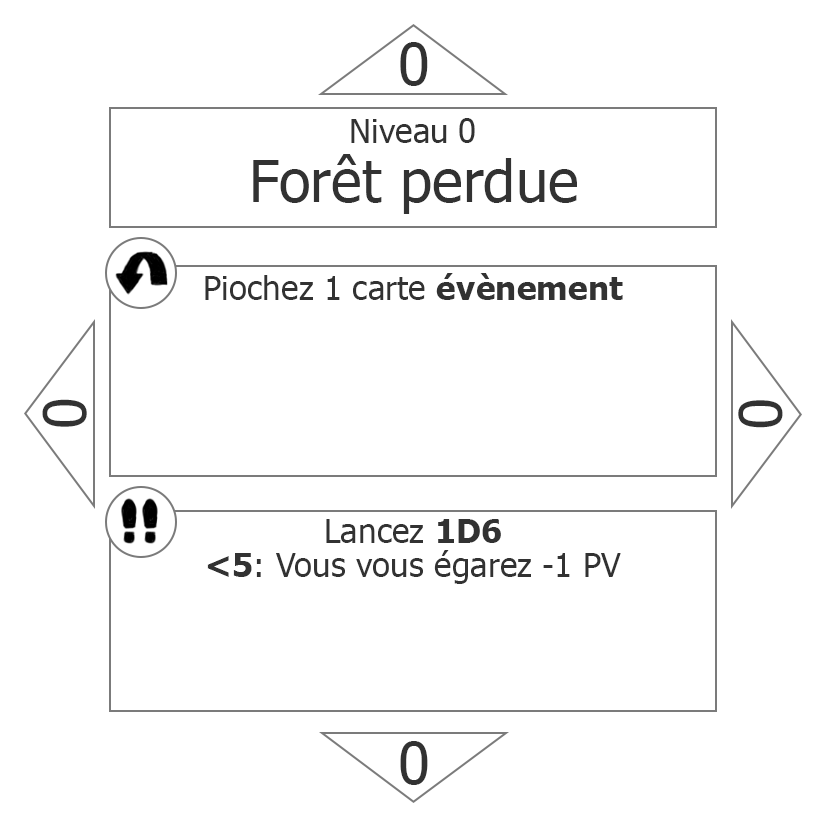
<style>
.page{position:relative;width:827px;height:827px;background:#ffffff}
.page>*{position:absolute;margin:0}
.t1{font:58.3px "Tahoma";color:#323232}
.t2{font:33.3px "Tahoma";color:#323232}
.t3{font:33.3px "Tahoma-Bold";color:#323232}
.t4{font:33.3px/33.3px "Tahoma";color:#323232}
.t5{font:33.3px/33.3px "Tahoma-Bold";color:#323232}
</style>
<div class="page">
<p class="t1" style="left:400px;top:42px;width:28px;height:44px">0</p>
<p class="t2" style="left:351px;top:119px;width:96px;height:24px">Niveau</p>
<p class="t2" style="left:459px;top:118px;width:16px;height:25px">0</p>
<p class="t1" style="left:253px;top:154px;width:324px;height:60px">Forêt perdue</p>
<p class="t2" style="left:205px;top:273px;width:418px;height:27px">Piochez 1 carte <span class="t3">évènement</span></p>
<p class="t1" style="left:42px;top:399px;width:45px;height:28px;rotate:-90deg">0</p>
<p class="t1" style="left:738px;top:400px;width:45px;height:28px;rotate:90deg">0</p>
<p class="t4" style="left:207px;top:519px;width:414px;height:65px;text-align:center">Lancez <span class="t5">1D6<br>&lt;5</span>: Vous vous égarez -1 PV</p>
<p class="t1" style="left:400px;top:741px;width:28px;height:44px;rotate:180deg">0</p>
</div>
